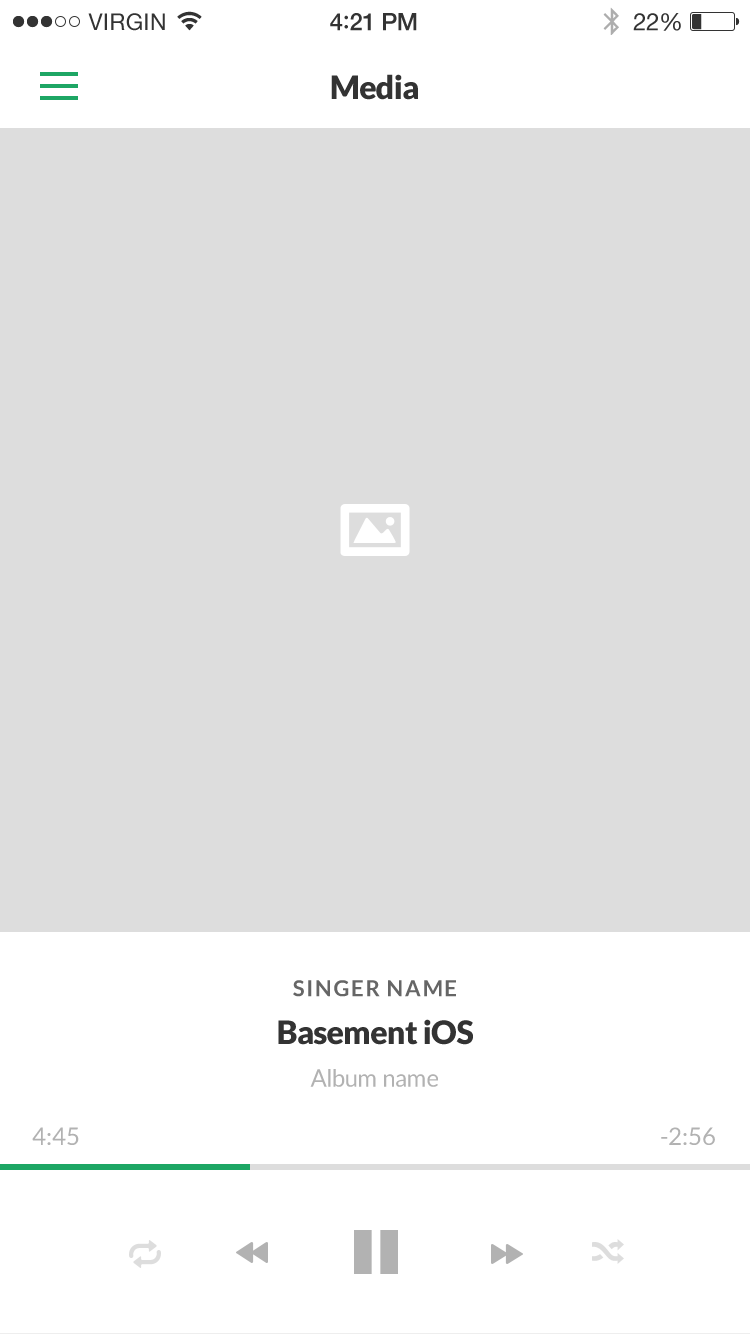
<style>
.page{position:relative;width:750px;height:1334px;background:#dddddd}
.page>*{position:absolute;margin:0}
.t1{font:32px "Lato-Black";letter-spacing:-0.02em;color:#333333}
.t2{font:22px "Lato-Bold";letter-spacing:0.07em;color:#666666}
.t3{font:24px "Lato-Regular";color:#b2b2b2}
</style>
<div class="page">
<p class="t1" style="left:331px;top:74px;width:87px;height:26px">Media</p>
<p class="t2" style="left:293px;top:980px;width:163px;height:17px">SINGER NAME</p>
<p class="t1" style="left:278px;top:1019px;width:195px;height:26px">Basement iOS</p>
<p class="t3" style="left:310px;top:1069px;width:128px;height:18px">Album name</p>
<p class="t3" style="left:32px;top:1127px;width:47px;height:18px">4:45</p>
<p class="t3" style="left:661px;top:1127px;width:54px;height:18px">-2:56</p>
</div>
